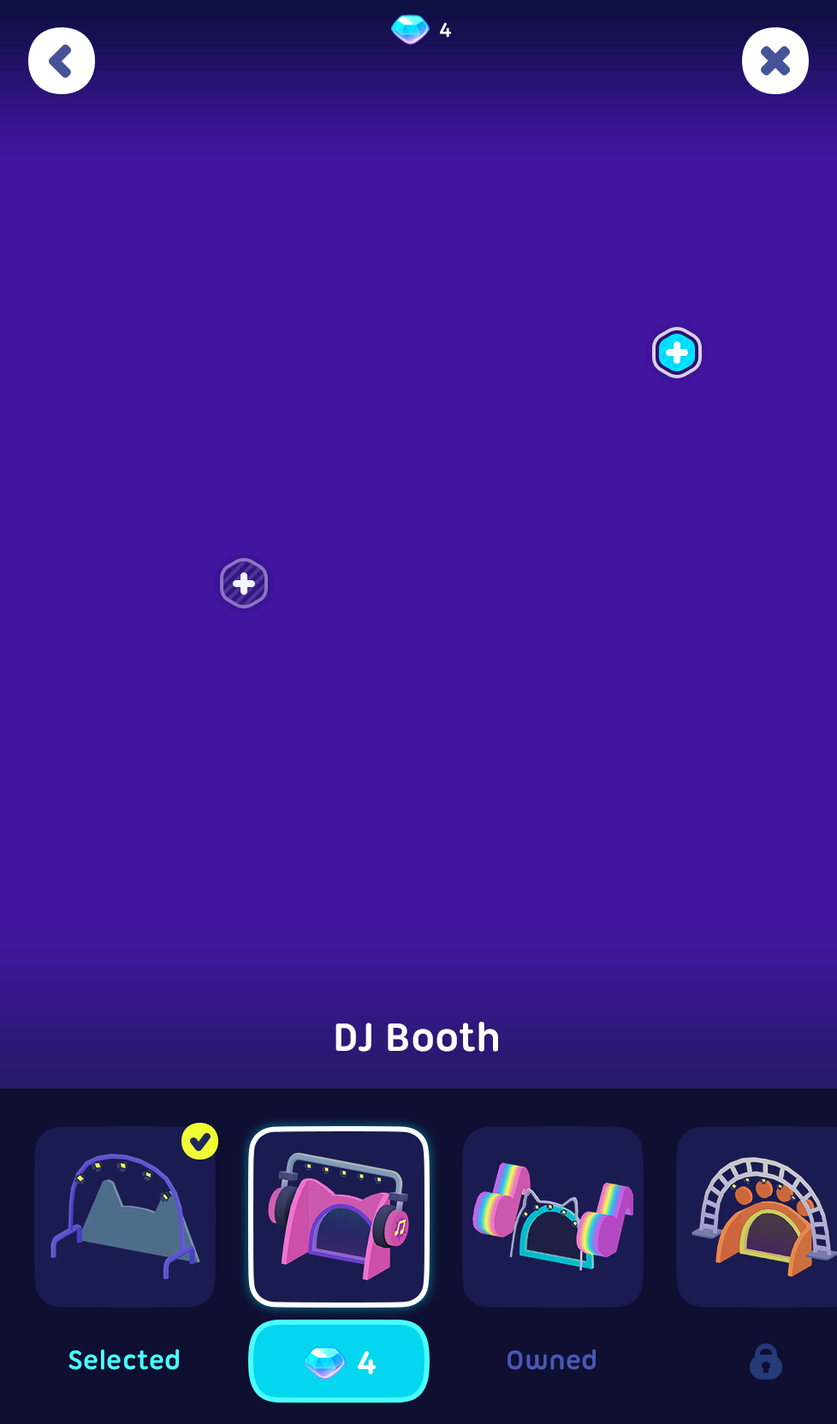
<style>
.page{position:relative;width:837px;height:1424px;background:#4115a0}
.page>*{position:absolute;margin:0}
.t1{font:21.4px "UbuntuTitling-Bold";letter-spacing:-0.025em;color:#ffffff}
.t2{font:42.8px "UbuntuTitling-Bold";color:#ffffff}
.t3{font:29.1px "UbuntuTitling-Bold";color:#4afdff}
.t4{font:29.1px "UbuntuTitling-Bold";color:#4a57b5}
.t5{font:34.2px "UbuntuTitling-Bold";letter-spacing:-0.025em;color:#ffffff;text-transform:uppercase}
</style>
<div class="page">
<p class="t1" style="left:440px;top:22px;width:11px;height:16px">4</p>
<p class="t2" style="left:336px;top:1022px;width:162px;height:30px">DJ Booth</p>
<p class="t3" style="left:68px;top:1349px;width:111px;height:21px">Selected</p>
<p class="t4" style="left:508px;top:1349px;width:88px;height:21px">Owned</p>
<p class="t5" style="left:358px;top:1352px;width:19px;height:23px">4</p>
</div>
